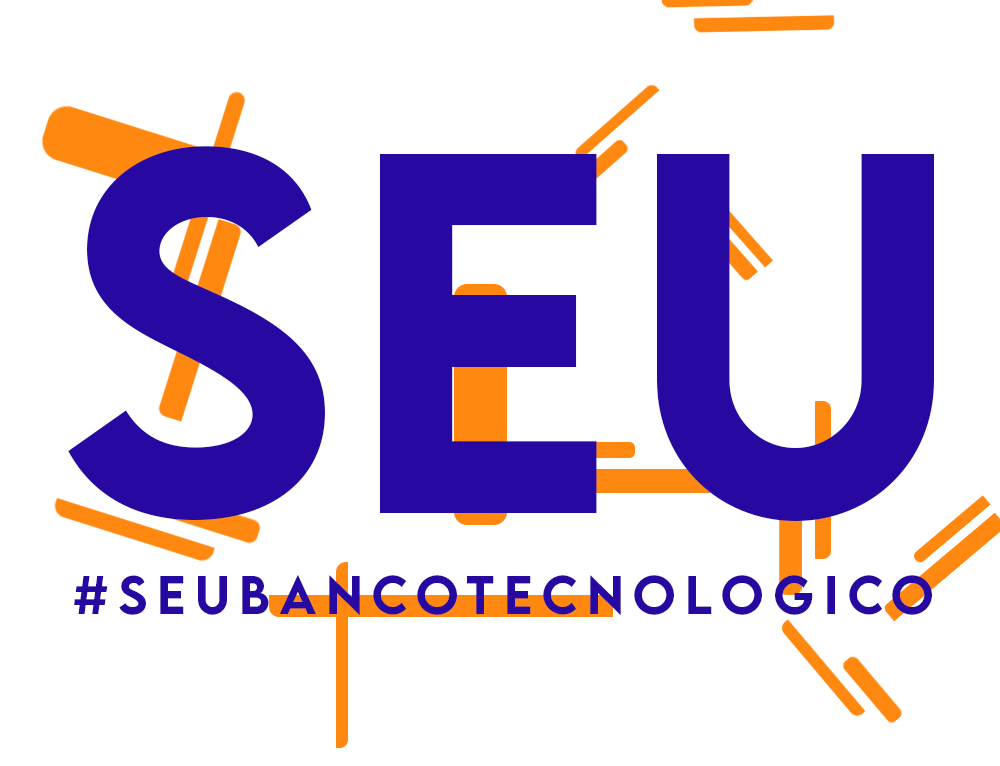
<style>
.page{position:relative;width:1000px;height:766px;background:#ffffff}
.page>*{position:absolute;margin:0}
.t1{font:456.2px "LEMONMILK-Medium";letter-spacing:0.025em;color:#2708a0}
.t2{font:48px "LEMONMILK-Medium";letter-spacing:0.2em;color:#2708a0}
</style>
<div class="page">
<p class="t1" style="left:68px;top:146px;width:866px;height:375px">seu</p>
<p class="t2" style="left:74px;top:575px;width:858px;height:40px">#seubancotecnologico</p>
</div>
